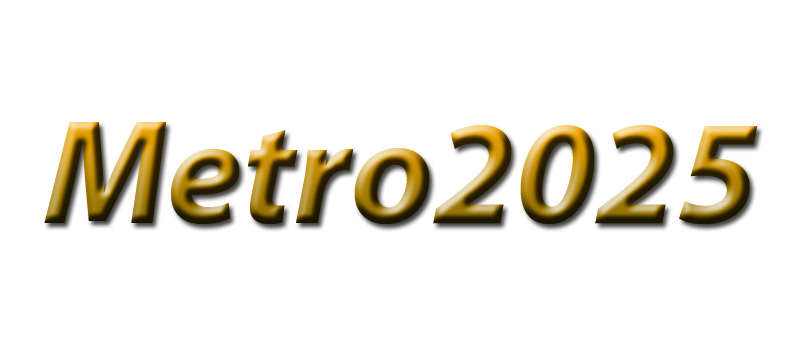
<style>
.page{position:relative;width:800px;height:340px;background:#ffffff}
.page>*{position:absolute;margin:0}
.t1{font:150px "MyriadPro-BoldIt"}
</style>
<div class="page">
<p class="t1" style="left:44px;top:122px;width:714px;height:103px">Metro2025</p>
</div>
